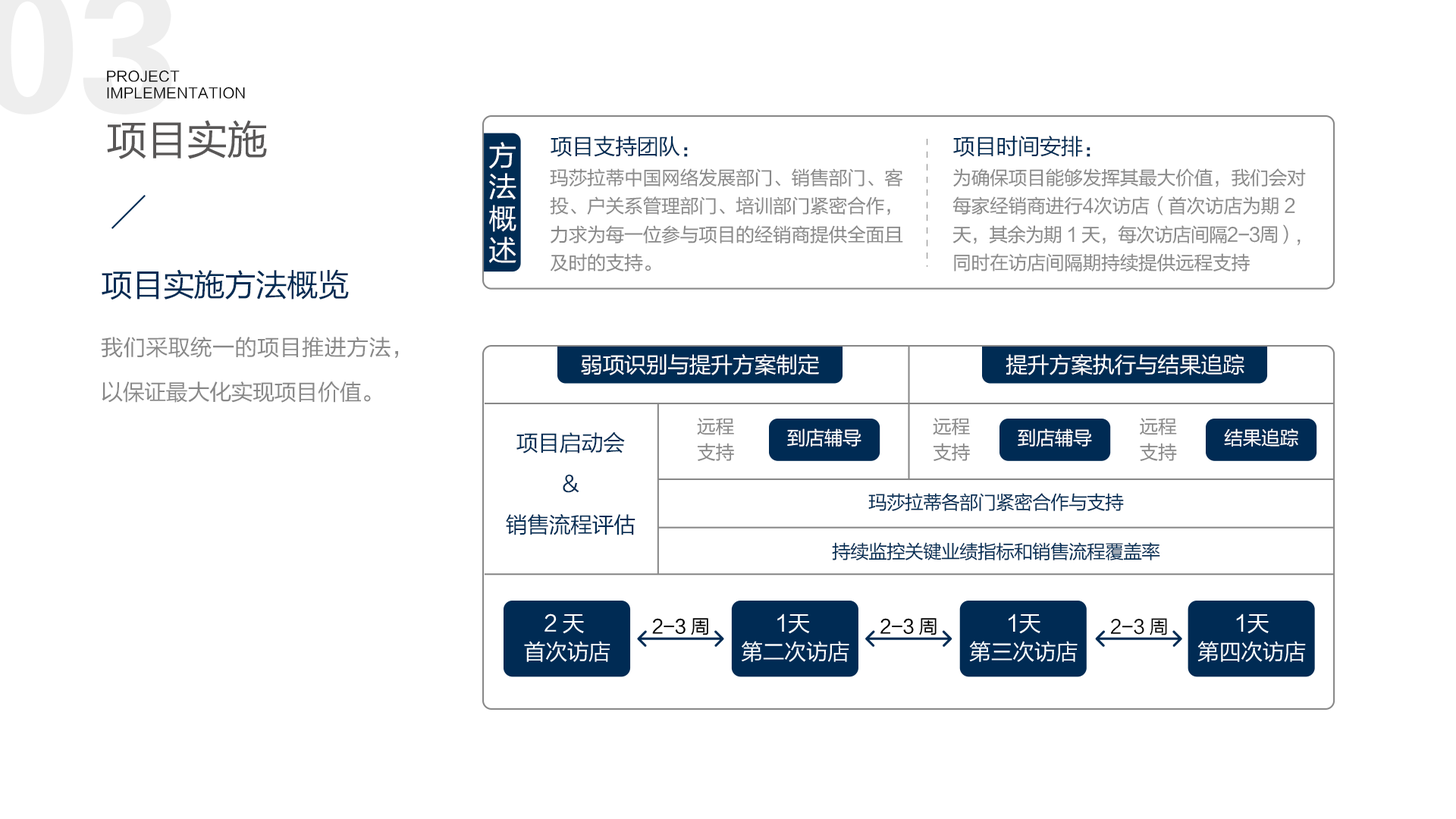
<style>
.page{position:relative;width:1456px;height:819px;background:#ffffff}
.page>*{position:absolute;margin:0}
.t1{font:14.1px "FZLTHJW--GB1-0";letter-spacing:0.02em;color:#000000}
.t2{font:41.1px "FZLTHJW--GB1-0";letter-spacing:-0.02em;color:#595757}
.t3{font:22.1px "FZLTHJW--GB1-0";letter-spacing:-0.02em;color:#002c54}
.t4{font:28.4px/31.6px "FZLTHJW--GB1-0";color:#ffffff}
.t5{font:19px/28.4px "FZLTHJW--GB1-0";letter-spacing:-0.02em;color:#888888}
.t6{font:19px/28.4px "FZLTHJW--GB1-0";letter-spacing:-0.04em;color:#888888}
.t7{font:31.6px "FZLTHJW--GB1-0";letter-spacing:-0.02em;color:#002c54}
.t8{font:22.1px/44.2px "FZLTHJW--GB1-0";letter-spacing:-0.02em;color:#888888}
.t9{font:22.1px "FZLTHJW--GB1-0";letter-spacing:-0.02em;color:#ffffff}
.t10{font:19px/25.3px "FZLTHJW--GB1-0";letter-spacing:-0.02em;color:#888888}
.t11{font:22.1px/41.1px "FZLTHJW--GB1-0";letter-spacing:-0.02em;color:#002c54}
.t12{font:19px "FZLTHJW--GB1-0";letter-spacing:-0.02em;color:#ffffff}
.t13{font:19px "FZLTHJW--GB1-0";letter-spacing:-0.04em;color:#002c54}
.t14{font:19px "FZLTHJW--GB1-0";letter-spacing:-0.02em;color:#000000}
</style>
<div class="page">
<p class="t1" style="left:107px;top:70px;width:138px;height:29px">PROJECT <br>IMPLEMENTATION</p>
<p class="t2" style="left:107px;top:120px;width:160px;height:39px">项目实施</p>
<p class="t3" style="left:551px;top:136px;width:137px;height:21px">项目支持团队：</p>
<p class="t3" style="left:953px;top:135px;width:137px;height:22px">项目时间安排：</p>
<p class="t4" style="left:489px;top:142px;width:27px;height:121px">方<br>法<br>概<br>述</p>
<p class="t5" style="left:550px;top:168px;width:353px;height:103px;text-align:justify">玛莎拉蒂中国网络发展部门、销售部门、客投、户关系管理部门、培训部门紧密合作，力求为每一位参与项目的经销商提供全面且及时的支持。</p>
<p class="t5" style="left:952px;top:168px;width:354px;height:104px">为确保项目能够发挥其最大价值，我们会对每家经销商进行4次访店（首次访店为期 2 <span class="t6">天，其余为期 1 天，每次访店间隔2-3周）</span>,同时在访店间隔期持续提供远程支持</p>
<p class="t7" style="left:102px;top:269px;width:247px;height:31px">项目实施方法概览</p>
<p class="t8" style="left:101px;top:337px;width:297px;height:66px;text-align:justify">我们采取统一的项目推进方法，以保证最大化实现项目价值。</p>
<p class="t9" style="left:581px;top:354px;width:238px;height:21px">弱项识别与提升方案制定</p>
<p class="t9" style="left:1006px;top:354px;width:238px;height:21px">提升方案执行与结果追踪</p>
<p class="t10" style="left:697px;top:418px;width:37px;height:43px">远程<br>支持</p>
<p class="t10" style="left:933px;top:418px;width:37px;height:43px">远程<br>支持</p>
<p class="t10" style="left:1140px;top:418px;width:37px;height:43px">远程<br>支持</p>
<p class="t11" style="left:506px;top:432px;width:129px;height:103px;text-align:center">项目启动会<br>&amp;<br>销售流程评估</p>
<p class="t12" style="left:787px;top:428px;width:74px;height:19px">到店辅导</p>
<p class="t12" style="left:1018px;top:428px;width:74px;height:19px">到店辅导</p>
<p class="t12" style="left:1224px;top:428px;width:74px;height:19px">结果追踪</p>
<p class="t13" style="left:868px;top:493px;width:256px;height:18px">玛莎拉蒂各部门紧密合作与支持</p>
<p class="t13" style="left:832px;top:542px;width:328px;height:18px">持续监控关键业绩指标和销售流程覆盖率</p>
<p class="t14" style="left:1110px;top:618px;width:57px;height:17px">2-3 周</p>
</div>
